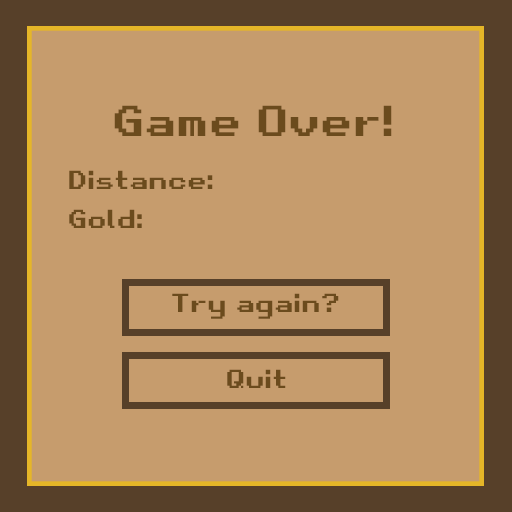
<style>
.page{position:relative;width:512px;height:512px;background:#c69c6d}
.page>*{position:absolute;margin:0}
.t1{font:41.7px "RetroGaming";color:#6b4b1d}
.t2{font:25px "RetroGaming";color:#6b4b1d}
</style>
<div class="page">
<p class="t1" style="left:114px;top:105px;width:278px;height:31px">Game Over!</p>
<p class="t2" style="left:69px;top:170px;width:144px;height:19px">Distance:</p>
<p class="t2" style="left:69px;top:209px;width:73px;height:19px">Gold:</p>
<p class="t2" style="left:172px;top:293px;width:167px;height:26px">Try again?</p>
<p class="t2" style="left:227px;top:369px;width:59px;height:19px">Quit</p>
</div>
